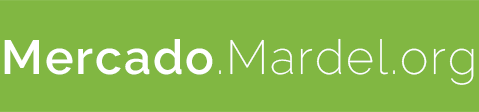
<style>
.page{position:relative;width:479px;height:112px;background:#81b742}
.page>*{position:absolute;margin:0}
.t1{font:48px "Raleway-ExtraLight";letter-spacing:0.04em;color:#ffffff}
.t2{font:48px "Raleway-SemiBold";letter-spacing:0.04em;color:#ffffff}
</style>
<div class="page">
<p class="t1" style="left:4px;top:38px;width:470px;height:47px"><span class="t2">Mercado</span>.Mardel.org</p>
</div>
